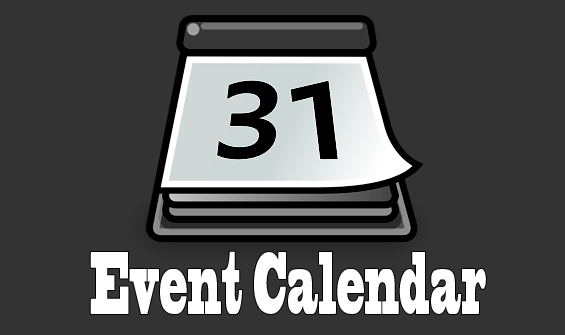
<style>
.page{position:relative;width:565px;height:335px;background:#333333}
.page>*{position:absolute;margin:0}
.t1{font:83.3px "BlackoakStd";color:#ffffff;scale:0.26 1}
</style>
<div class="page">
<p class="t1" style="left:90px;top:251px;width:396px;height:63px">Event Calendar</p>
</div>
